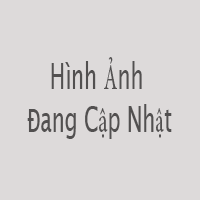
<style>
.page{position:relative;width:200px;height:200px;background:#dddada}
.page>*{position:absolute;margin:0}
.t1{font:36px "LucidaSans";color:#525050;scale:0.57 1}
.t2{font:36px "MinionPro-Regular";color:#525050;scale:0.57 1}
.t3{font:36px "LucidaConsole";color:#525050;scale:0.57 1}
</style>
<div class="page">
<p class="t1" style="left:27px;top:57px;width:145px;height:82px;text-align:center">Hình <span class="t2">Ả</span>nh <br><br><span class="t3">Đ</span>ang C<span class="t2">ậ</span>p Nh<span class="t2">ậ</span>t</p>
</div>
